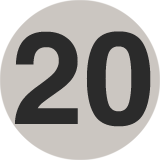
<style>
.page{position:relative;width:160px;height:160px;background:#cbc6c1}
.page>*{position:absolute;margin:0}
.t1{font:129.5px "Helvetica-Bold";color:#2b2b2b}
</style>
<div class="page">
<p class="t1" style="left:14px;top:31px;width:137px;height:96px">20</p>
</div>
